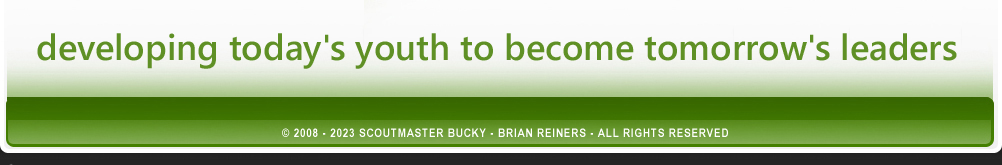
<style>
.page{position:relative;width:1002px;height:165px}
.page>*{position:absolute;margin:0}
.t1{font:36px "SegoeUI-Semibold";color:#5f9025}
.t2{font:12px "ArialNarrow-Bold";letter-spacing:0.07em;color:#ffffff;text-transform:uppercase}
</style>
<div class="page">
<p class="t1" style="left:37px;top:33px;width:920px;height:36px">developing today's youth to become tomorrow's leaders</p>
<p class="t2" style="left:282px;top:128px;width:446px;height:9px">© 2008 - 2023 Scoutmaster Bucky - Brian Reiners - All Rights Reserved</p>
</div>
